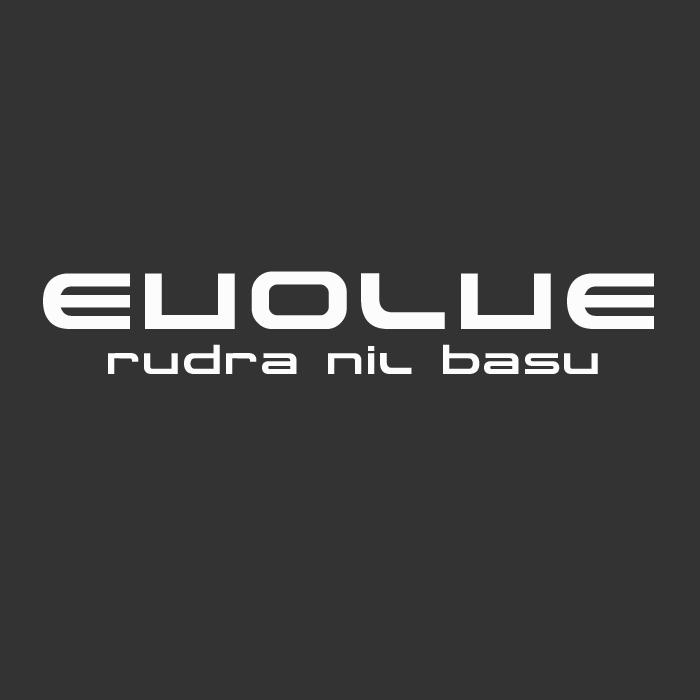
<style>
.page{position:relative;width:700px;height:700px;background:#333333}
.page>*{position:absolute;margin:0}
.t1{font:37.5px "Spaceman";color:#fcfcfc}
.t2{font:100px "Spaceman";color:#fcfcfc}
</style>
<div class="page">
<p class="t1" style="left:43px;top:271px;width:611px;height:103px;text-align:center"><span class="t2">EVOLVE</span><br>Rudra Nil Basu</p>
</div>
